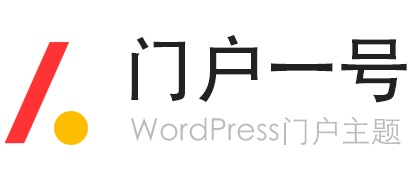
<style>
.page{position:relative;width:420px;height:180px;background:#ffffff}
.page>*{position:absolute;margin:0}
.t1{font:72px "AdobeHeitiStd-Regular";color:#222222}
.t2{font:30.5px "STXihei";color:#bbbbbb}
</style>
<div class="page">
<p class="t1" style="left:131px;top:35px;width:276px;height:68px">门户一号</p>
<p class="t2" style="left:131px;top:116px;width:270px;height:30px">WordPress门户主题</p>
</div>
